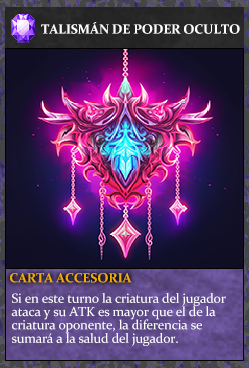
<style>
.page{position:relative;width:249px;height:368px}
.page>*{position:absolute;margin:0}
.t1{font:13.3px "Constantia-Bold";letter-spacing:-0.02em;color:#ffffff}
.t2{font:13.3px "Constantia-Bold";letter-spacing:-0.02em;color:#f2ac05}
.t3{font:13.3px/13.3px "Constantia";letter-spacing:-0.02em;color:#ffffff}
</style>
<div class="page">
<p class="t1" style="left:41px;top:22px;width:199px;height:12px">TALISMÁN DE PODER OCULTO</p>
<p class="t2" style="left:10px;top:273px;width:122px;height:10px">CARTA ACCESORIA</p>
<p class="t3" style="left:11px;top:293px;width:215px;height:53px">Si en este turno la criatura del jugador <br>ataca y su ATK es mayor que el de la <br>criatura oponente, la diferencia se <br>sumará a la salud del jugador.</p>
</div>
